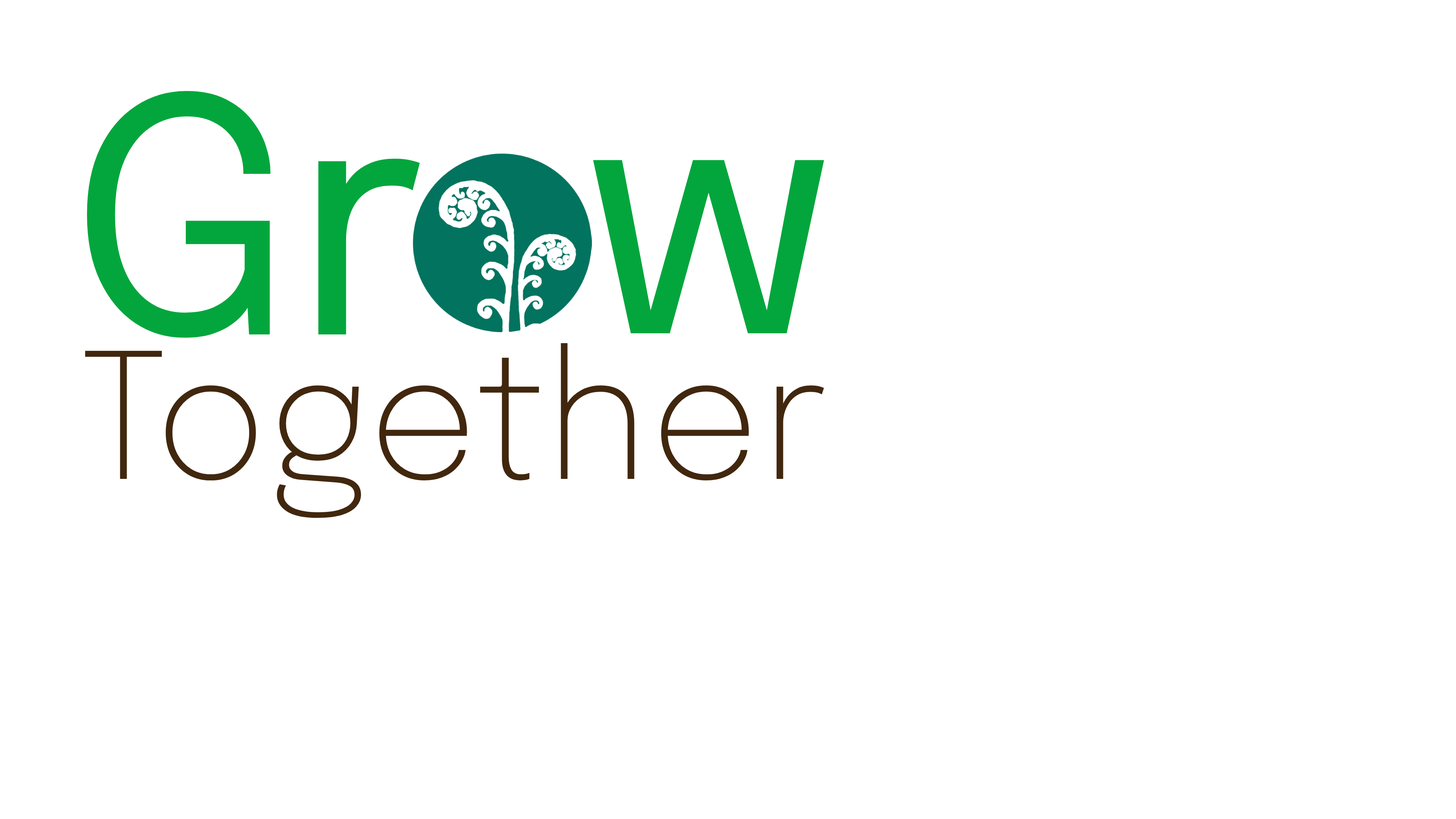
<style>
.page{position:relative;width:1456px;height:819px;background:#ffffff}
.page>*{position:absolute;margin:0}
.t1{font:326.1px "Epilogue-Regular";color:#03a63c}
.t2{font:173.7px "Epilogue-ExtraLight";color:#41270e}
</style>
<div class="page">
<p class="t1" style="left:87px;top:91px;width:333px;height:247px">Gr</p>
<p class="t1" style="left:593px;top:160px;width:231px;height:173px">w</p>
<p class="t2" style="left:85px;top:343px;width:739px;height:175px">Together</p>
</div>
